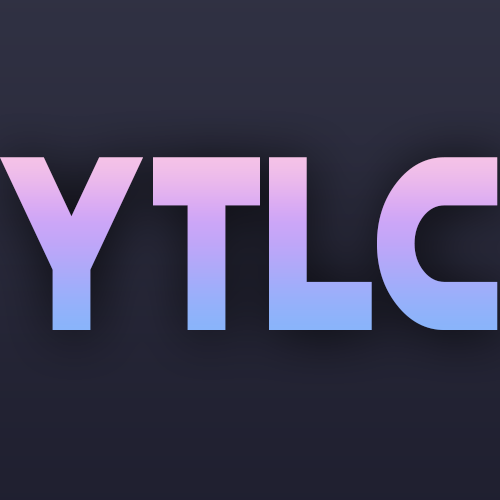
<style>
.page{position:relative;width:500px;height:500px}
.page>*{position:absolute;margin:0}
.t1{font:243.8px "DeathStar";letter-spacing:0.025em;scale:0.79 1}
</style>
<div class="page">
<p class="t1" style="left:0px;top:157px;width:498px;height:173px">YTLC</p>
</div>
